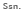
<style>
.page{position:relative;width:24px;height:13px;background:#ffffff}
.page>*{position:absolute;margin:0}
.t1{font:9px "AmiraParadiso";letter-spacing:0.05em;color:#646464}
</style>
<div class="page">
<p class="t1" style="left:3px;top:3px;width:18px;height:6px">Ssn.</p>
</div>
